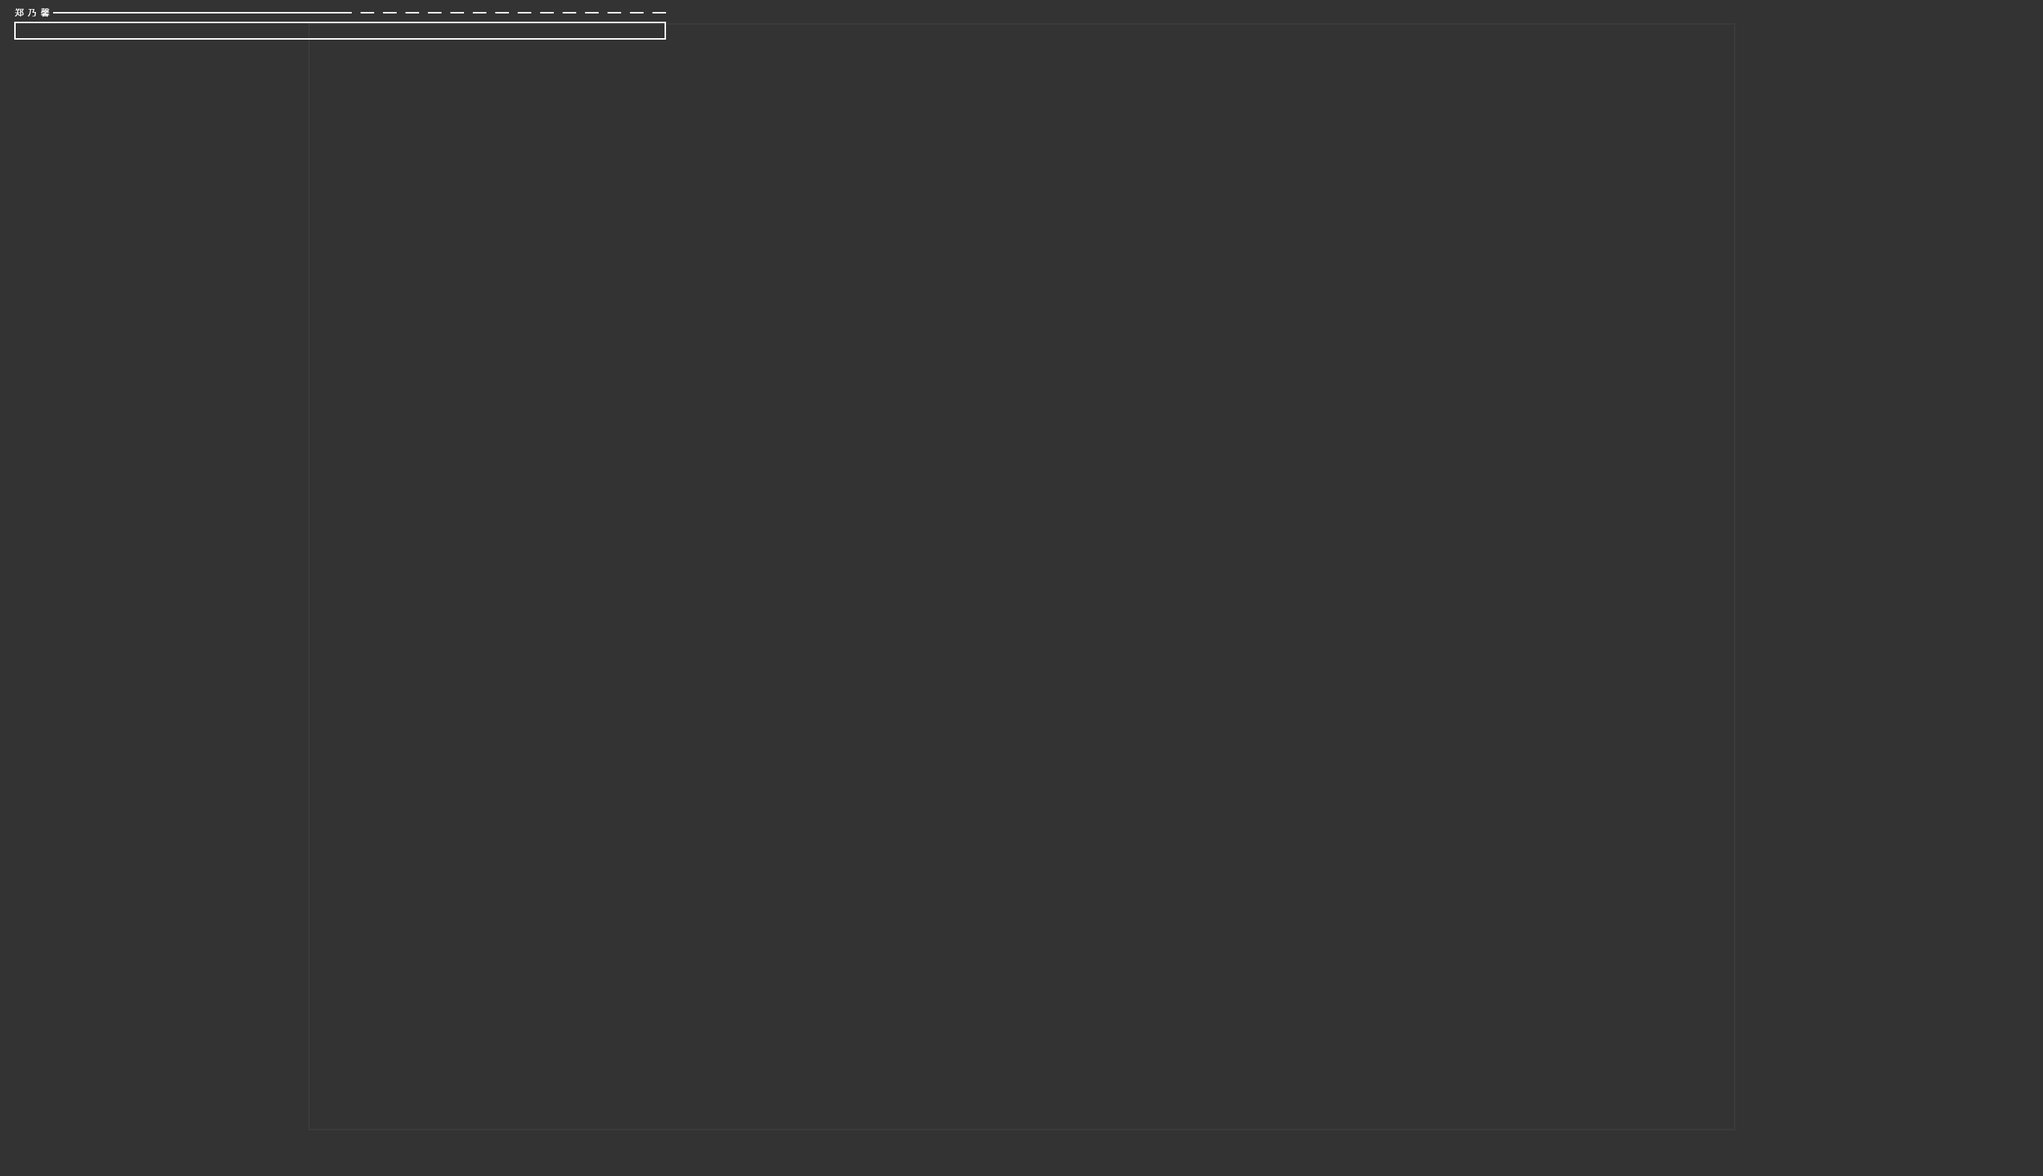
<style>
.page{position:relative;width:2043px;height:1176px;background:#333333}
.page>*{position:absolute;margin:0}
.t1{font:9px "NotoSansCJKsc-DemiLight";letter-spacing:0.4em;color:#ffffff;font-weight:bold}
</style>
<div class="page">
<p class="t1" style="left:15px;top:8px;width:34px;height:9px">郑乃馨</p>
</div>
